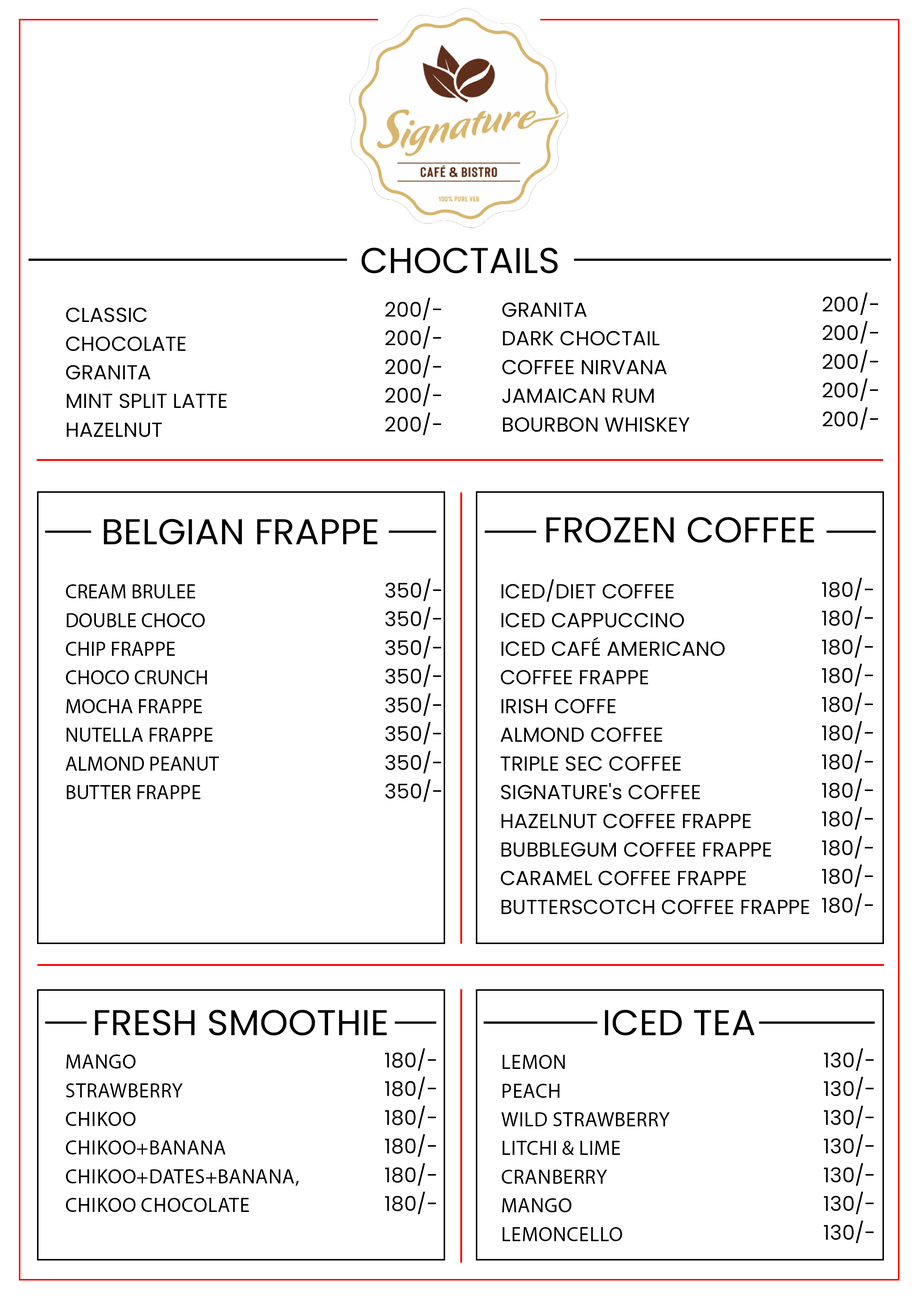
<style>
.page{position:relative;width:918px;height:1299px;background:#ffffff}
.page>*{position:absolute;margin:0}
.t1{font:35.9px "Poppins-Regular";color:#000000;text-transform:uppercase}
.t2{font:20.4px/28.7px "Poppins-Regular";color:#000000}
.t3{font:20.4px/28.7px "Poppins-Regular";color:#000000;text-transform:uppercase}
</style>
<div class="page">
<p class="t1" style="left:362px;top:247px;width:196px;height:26px">CHOCTAILS</p>
<p class="t2" style="left:823px;top:292px;width:56px;height:138px">200/-<br>200/-<br>200/-<br>200/-<br>200/-</p>
<p class="t2" style="left:385px;top:297px;width:57px;height:138px">200/-<br>200/-<br>200/-<br>200/-<br>200/-</p>
<p class="t2" style="left:502px;top:302px;width:188px;height:130px">GRANITA<br>DARK CHOCTAIL<br>COFFEE NIRVANA<br>JAMAICAN RUM<br>BOURBON WHISKEY</p>
<p class="t2" style="left:66px;top:307px;width:161px;height:130px">CLASSIC<br>CHOCOLATE<br>GRANITA<br>MINT SPLIT LATTE<br>HAZELNUT</p>
<p class="t1" style="left:104px;top:519px;width:274px;height:25px">BELGIAN FRAPPE</p>
<p class="t1" style="left:546px;top:517px;width:269px;height:26px">FROZEN COFFEE</p>
<p class="t2" style="left:385px;top:578px;width:57px;height:224px">350/-<br>350/-<br>350/-<br>350/-<br>350/-<br>350/-<br>350/-<br>350/-</p>
<p class="t2" style="left:500px;top:579px;width:309px;height:335px">ICED/DIET COFFEE<br>ICED CAPPUCCINO<br>ICED CAFÉ AMERICANO<br>COFFEE FRAPPE<br>IRISH COFFE<br>ALMOND COFFEE<br>TRIPLE SEC COFFEE<br>SIGNATURE's COFFEE<br><span class="t3">Hazelnut coffee frappe <br>Bubblegum coffee frappe <br>Caramel coffee frappe<br>Butterscotch coffee frappe</span></p>
<p class="t2" style="left:822px;top:577px;width:51px;height:339px">180/-<br>180/-<br>180/-<br>180/-<br>180/-<br>180/-<br>180/-<br>180/-<br>180/-<br>180/-<br>180/-<br>180/-</p>
<p class="t2" style="left:66px;top:584px;width:153px;height:215px">CREAM BRULEE<br>DOUBLE CHOCO<br>CHIP FRAPPE<br>CHOCO CRUNCH<br>MOCHA FRAPPE<br>NUTELLA FRAPPE<br>ALMOND PEANUT<br>BUTTER FRAPPE</p>
<p class="t1" style="left:95px;top:1009px;width:292px;height:26px">FRESH SMOOTHIE</p>
<p class="t1" style="left:605px;top:1009px;width:150px;height:26px">ICed TEA</p>
<p class="t2" style="left:385px;top:1048px;width:51px;height:166px">180/-<br>180/-<br>180/-<br>180/-<br>180/-<br>180/-</p>
<p class="t2" style="left:824px;top:1048px;width:50px;height:195px">130/-<br>130/-<br>130/-<br>130/-<br>130/-<br>130/-<br>130/-</p>
<p class="t3" style="left:66px;top:1054px;width:233px;height:158px">Mango <br>Strawberry<br>Chikoo<br>Chikoo+Banana<br>Chikoo+Dates+Banana, <br>Chikoo Chocolate</p>
<p class="t3" style="left:502px;top:1055px;width:168px;height:186px">Lemon <br>Peach<br>Wild Strawberry<br>Litchi &amp; Lime<br>Cranberry<br>Mango<br>lemoncello</p>
</div>
